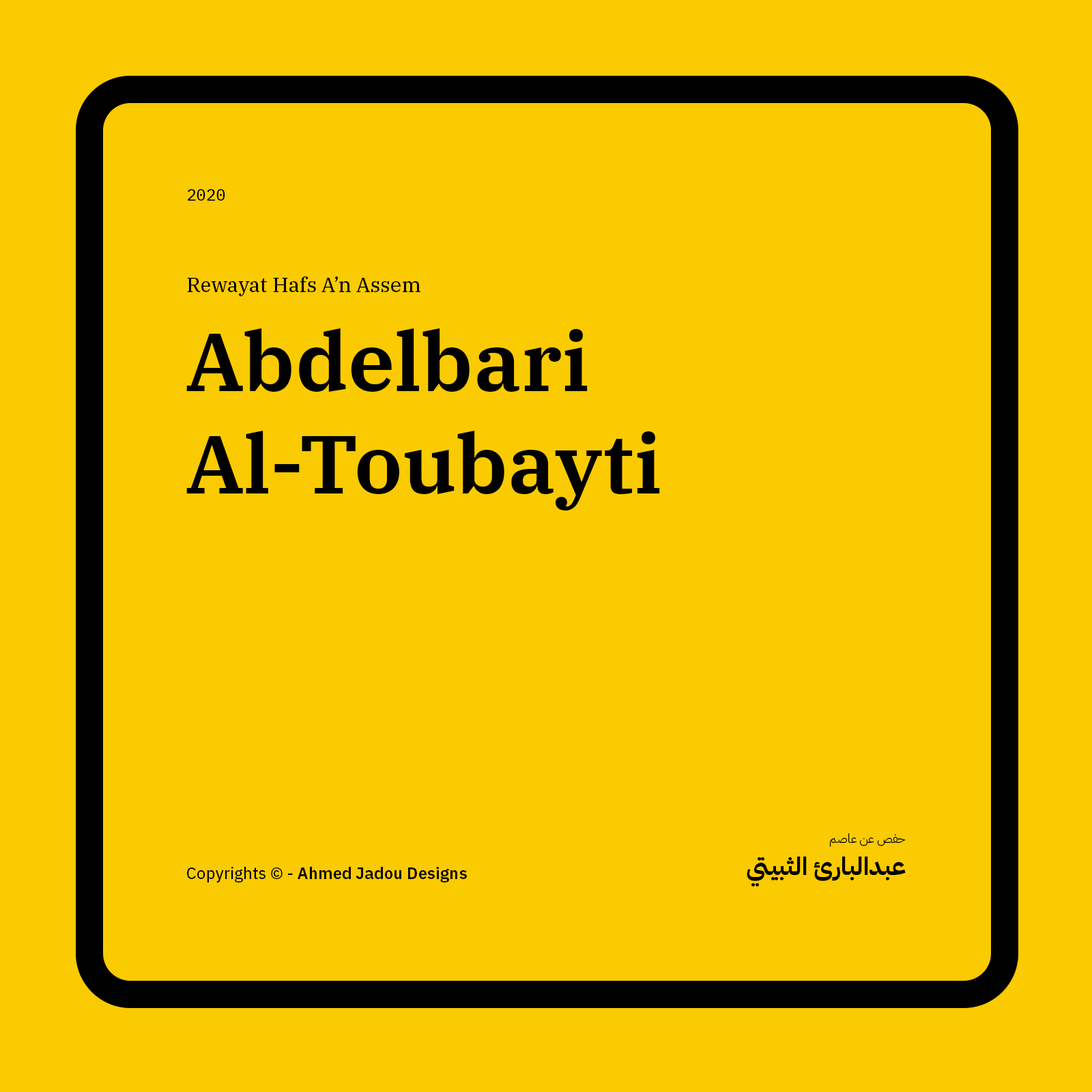
<style>
.page{position:relative;width:1092px;height:1092px;background:#facb00}
.page>*{position:absolute;margin:0}
.t1{font:16.4px "IBMPlexMono-Text";color:#000000}
.t2{font:20.5px "IBMPlexSerif-Text";color:#000000}
.t3{font:81.9px/102.7px "IBMPlexSerif-SemiBold";color:#000000}
.t4{font:12.3px "IBMPlexArabic-Light";color:#000000}
.t5{font:24.6px "IBMPlexArabic-Bold";color:#000000}
.t6{font:16.4px "IBMPlexSans-SemiBold";color:#000000}
.t7{font:16.4px "IBMPlexSans-Text";color:#000000}
</style>
<div class="page">
<p class="t1" style="left:188px;top:189px;width:37px;height:12px">2020</p>
<p class="t2" style="left:187px;top:276px;width:233px;height:20px">Rewayat Hafs A’n Assem</p>
<p class="t3" style="left:186px;top:328px;width:474px;height:183px">Abdelbari Al-Toubayti</p>
<p class="t4" style="left:830px;top:833px;width:76px;height:14px">حفص عن عاصم</p>
<p class="t5" style="left:747px;top:857px;width:159px;height:30px">عبدالبارئ الثبيتي</p>
<p class="t6" style="left:187px;top:867px;width:280px;height:15px"><span class="t7">Copyrights © - </span>Ahmed Jadou Designs</p>
</div>
